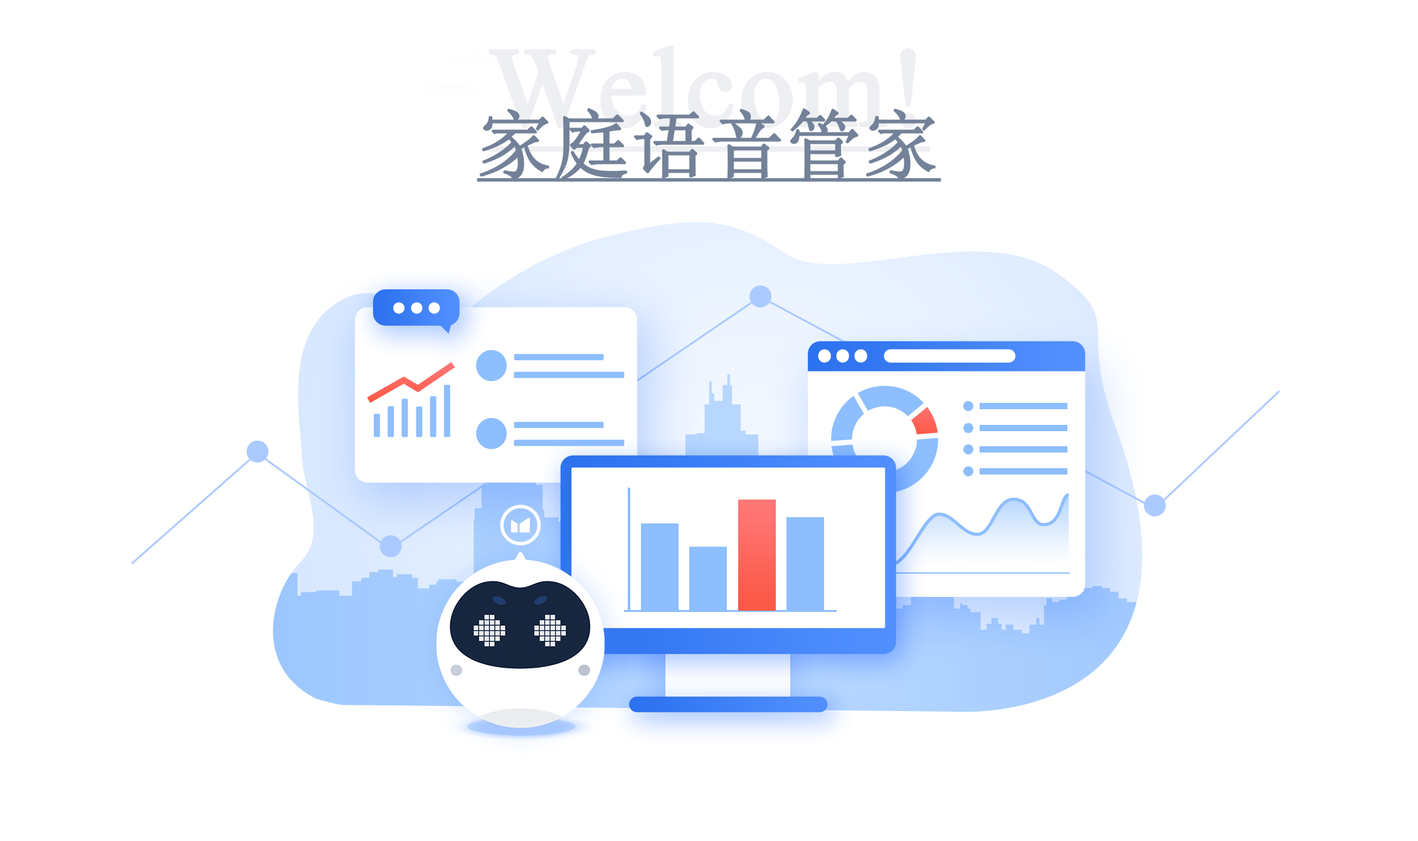
<style>
.page{position:relative;width:1418px;height:841px;background:#ffffff}
.page>*{position:absolute;margin:0}
.t1{font:75.3px "SimSun";color:#738299;font-weight:bold;text-decoration:underline}
</style>
<div class="page">
<p class="t1" style="left:477px;top:107px;width:465px;height:75px">家庭语音管家</p>
</div>
